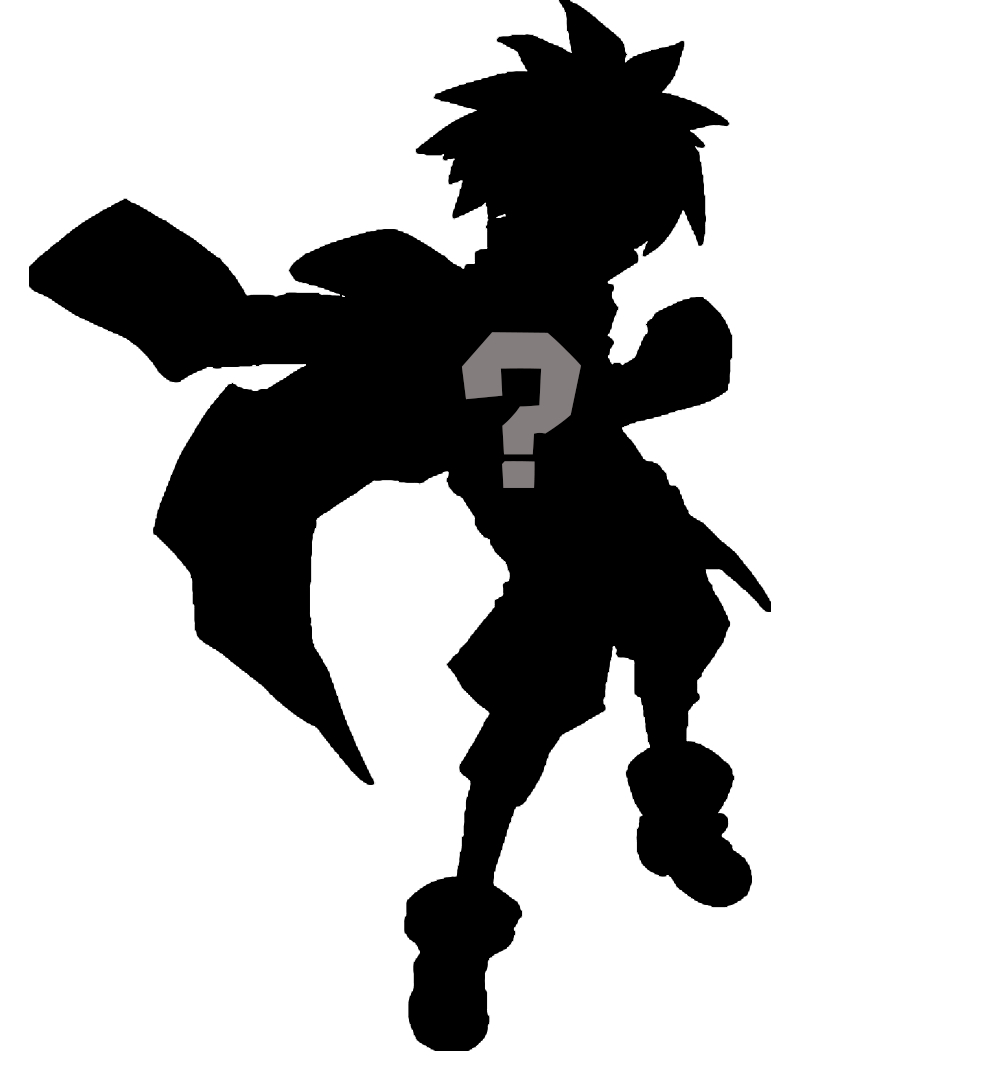
<style>
.page{position:relative;width:1000px;height:1080px;background:#ffffff}
.page>*{position:absolute;margin:0}
.t1{font:200px "Splat2K";color:#847d7d;font-weight:bold}
</style>
<div class="page">
<p class="t1" style="left:461px;top:332px;width:120px;height:156px">?</p>
</div>
